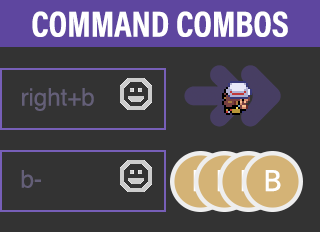
<style>
.page{position:relative;width:320px;height:232px;background:#333333}
.page>*{position:absolute;margin:0}
.t1{font:36.3px "AcuminProCond-Bold";color:#ffffff;text-transform:uppercase}
.t2{font:24px "Helvetica";color:#645f78}
.t3{font:29.4px "Avenir-Medium";color:#ffffff}
</style>
<div class="page">
<p class="t1" style="left:32px;top:11px;width:256px;height:26px">Command Combos</p>
<p class="t2" style="left:22px;top:88px;width:72px;height:23px">right+b</p>
<p class="t2" style="left:21px;top:170px;width:20px;height:18px">b-</p>
<p class="t3" style="left:265px;top:170px;width:16px;height:22px">B</p>
</div>
